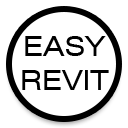
<style>
.page{position:relative;width:128px;height:128px;background:#ffffff}
.page>*{position:absolute;margin:0}
.t1{font:28px "Swiss721BT-RomanExtended";color:#000000}
</style>
<div class="page">
<p class="t1" style="left:22px;top:36px;width:87px;height:54px;text-align:center">EASY<br>REVIT</p>
</div>
